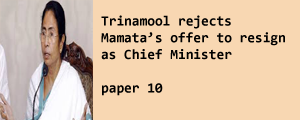
<style>
.page{position:relative;width:300px;height:120px;background:#f8d7b2}
.page>*{position:absolute;margin:0}
.t1{font:14px "Consolas-Bold";color:#000000}
</style>
<div class="page">
<p class="t1" style="left:101px;top:15px;width:184px;height:81px">Trinamool rejects<br>Mamata’s offer to resign<br>as Chief Minister<br><br>paper 10</p>
</div>
